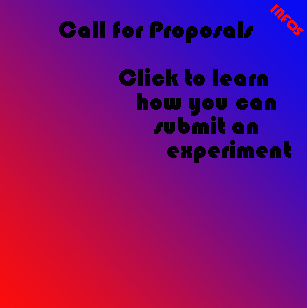
<style>
.page{position:relative;width:307px;height:308px}
.page>*{position:absolute;margin:0}
.t1{font:16px "Bauhaus93";color:#fc080f}
.t2{font:25px/24px "Bauhaus93";color:#010107}
</style>
<div class="page">
<p class="t1" style="left:270px;top:4px;width:34px;height:31px;rotate:44deg">INFOS</p>
<p class="t2" style="left:59px;top:21px;width:232px;height:142px">Call for Proposals<br><br>          Click to learn <br>             how you can <br>                submit an<br>                  experiment</p>
</div>
